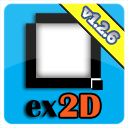
<style>
.page{position:relative;width:128px;height:128px}
.page>*{position:absolute;margin:0}
.t1{font:16px "ChunkFive-Roman"}
.t2{font:33px "BritannicBold";color:#000000}
.t3{font:33px "BritannicBold";color:#f85c1e}
</style>
<div class="page">
<p class="t1" style="left:82px;top:7px;width:37px;height:36px;rotate:45deg">v1.2.6</p>
<p class="t2" style="left:26px;top:100px;width:32px;height:17px">ex</p>
<p class="t3" style="left:60px;top:94px;width:40px;height:23px">2D</p>
</div>
